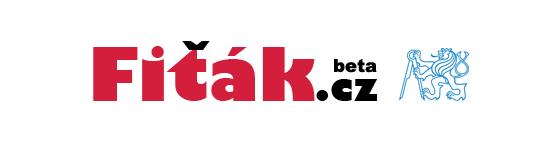
<style>
.page{position:relative;width:550px;height:150px;background:#ffffff}
.page>*{position:absolute;margin:0}
.t1{font:72px "GillSans-UltraBold";color:#000000}
.t2{font:72px "GillSans-UltraBold";color:#d31f3b}
.t3{font:36px "GillSans-UltraBold";color:#000000}
.t4{font:18px "Arial-Black";color:#000000}
</style>
<div class="page">
<p class="t1" style="left:182px;top:41px;width:28px;height:9px">ˇ</p>
<p class="t2" style="left:93px;top:46px;width:284px;height:55px">Fiták<span class="t3">.cz</span></p>
<p class="t4" style="left:334px;top:59px;width:43px;height:14px">beta</p>
</div>
